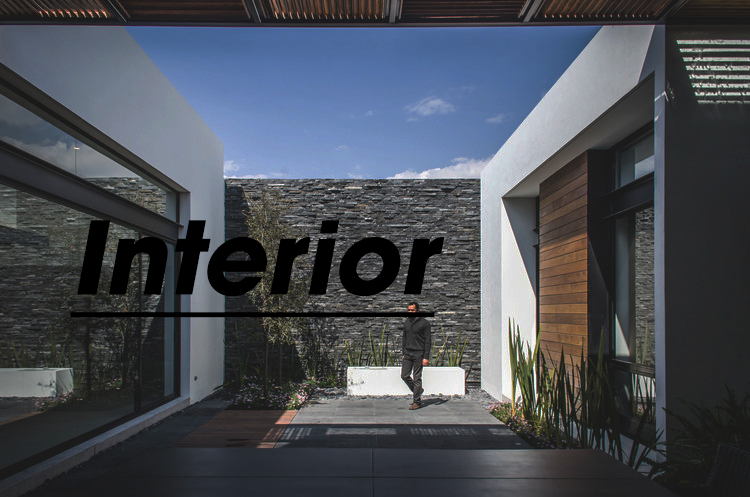
<style>
.page{position:relative;width:750px;height:497px}
.page>*{position:absolute;margin:0}
.t1{font:100px "ITCAvantGardePro-BoldObl";color:#000000;text-decoration:underline}
</style>
<div class="page">
<p class="t1" style="left:70px;top:220px;width:375px;height:98px">Interior</p>
</div>
